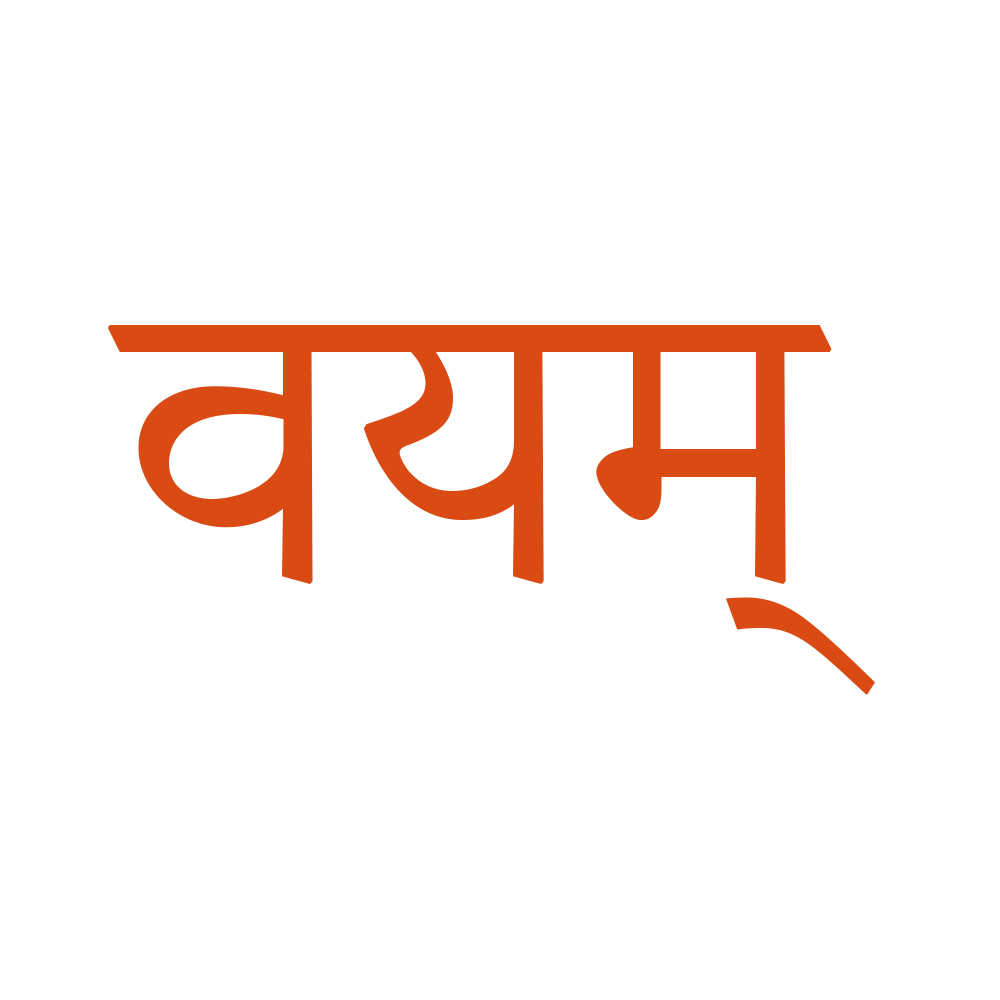
<style>
.page{position:relative;width:1000px;height:1000px;background:#ffffff}
.page>*{position:absolute;margin:0}
.t1{font:511.1px "AdobeDevanagari-Regular";color:#da4a13;text-transform:uppercase}
</style>
<div class="page">
<p class="t1" style="left:107px;top:325px;width:768px;height:370px">वयम्</p>
</div>
